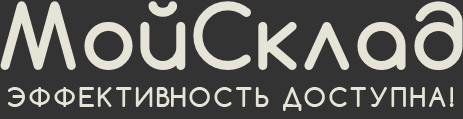
<style>
.page{position:relative;width:463px;height:119px;background:#333333}
.page>*{position:absolute;margin:0}
.t1{font:88px "Comfortaa-Bold";letter-spacing:0.016em;color:#e6e4d7}
.t2{font:26px "Comfortaa-Bold";letter-spacing:0.1em;color:#e6e4d7}
</style>
<div class="page">
<p class="t1" style="left:0px;top:1px;width:406px;height:69px">МойCкла</p>
<p class="t2" style="left:7px;top:87px;width:447px;height:24px">ЭФФЕКТИВНОСТЬ ДОСТУПНА!</p>
</div>
